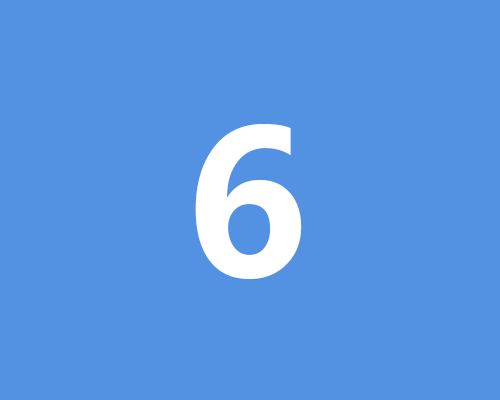
<style>
.page{position:relative;width:500px;height:400px;background:#5392e2}
.page>*{position:absolute;margin:0}
.t1{font:200px "MicrosoftYaHei-Bold";color:#ffffff}
</style>
<div class="page">
<p class="t1" style="left:195px;top:124px;width:107px;height:155px">6</p>
</div>
